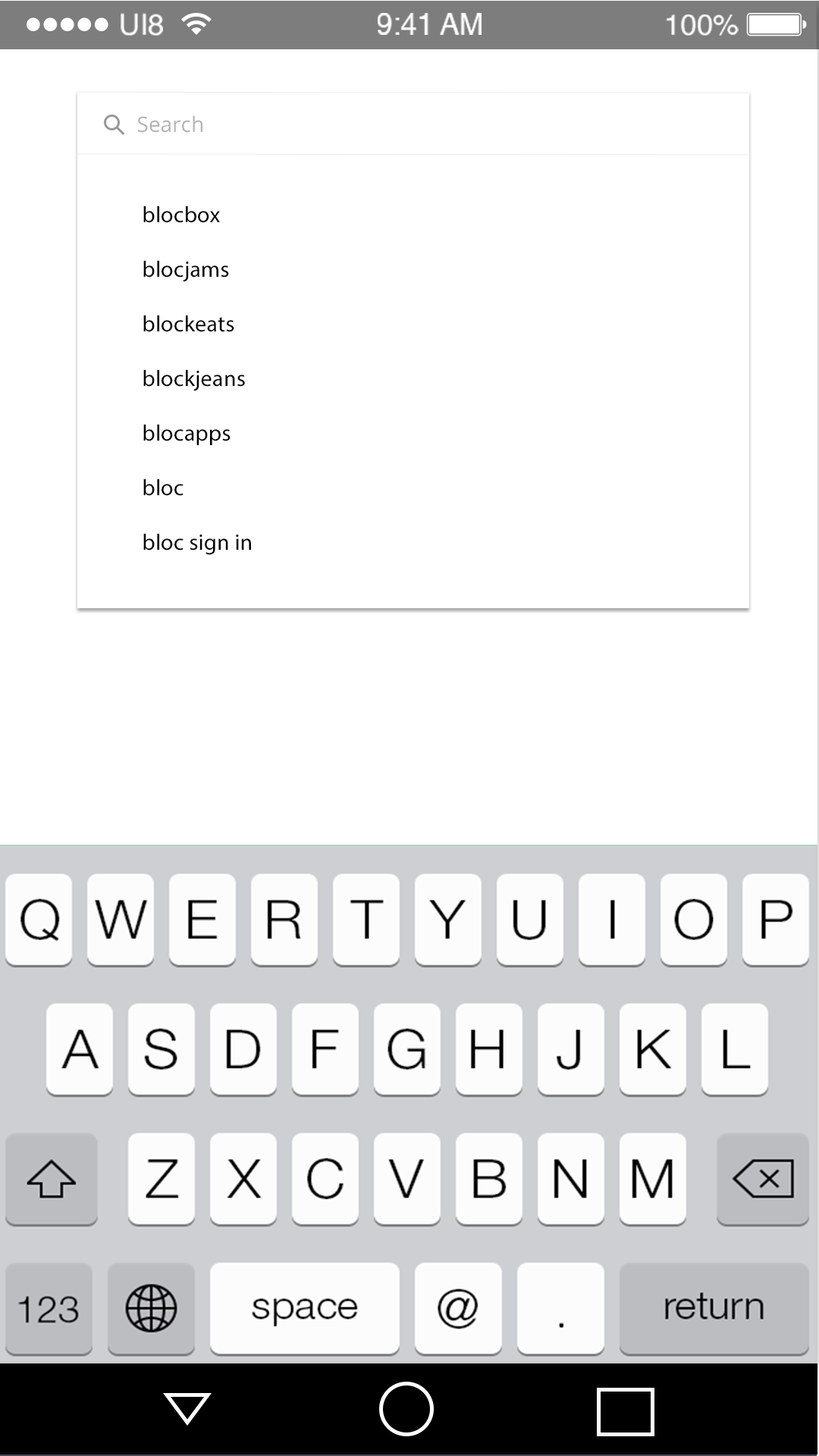
<style>
.page{position:relative;width:819px;height:1456px;background:#ffffff}
.page>*{position:absolute;margin:0}
.t1{font:29.1px "Helvetica";color:#ffffff}
.t2{font:21.2px "OpenSans";color:#b3b3b3}
.t3{font:22.7px "MyriadPro-Regular";letter-spacing:0.01em;color:#000000}
</style>
<div class="page">
<p class="t1" style="left:121px;top:13px;width:42px;height:23px">UI8</p>
<p class="t1" style="left:378px;top:13px;width:104px;height:22px">9:41 AM</p>
<p class="t1" style="left:667px;top:14px;width:72px;height:22px">100%</p>
<p class="t2" style="left:138px;top:115px;width:64px;height:18px">Search</p>
<p class="t3" style="left:143px;top:206px;width:108px;height:349px">blocbox<br><br>blocjams<br><br>blockeats<br><br>blockjeans<br><br>blocapps<br><br>bloc<br><br>bloc sign in</p>
</div>
